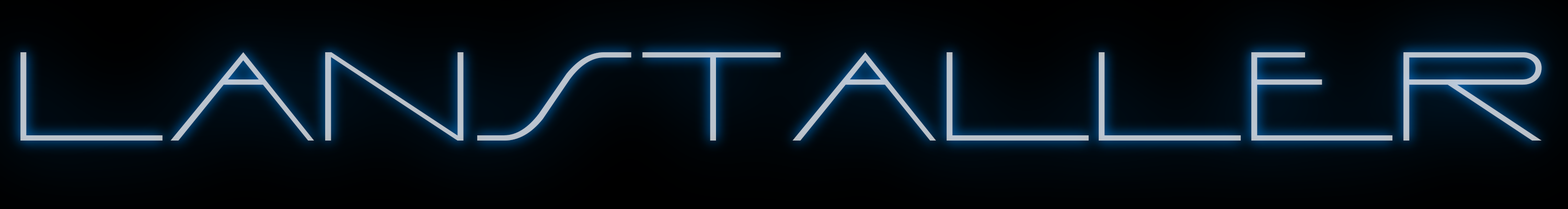
<style>
.page{position:relative;width:1568px;height:209px}
.page>*{position:absolute;margin:0}
.t1{font:112.7px "Interdimensional";color:#bbc3cd}
</style>
<div class="page">
<p class="t1" style="left:20px;top:52px;width:1522px;height:89px">LANSTALLER</p>
</div>
